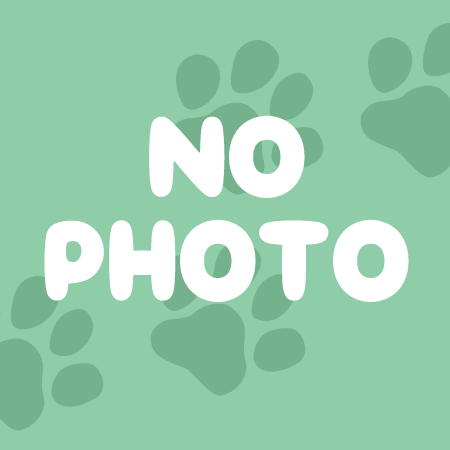
<style>
.page{position:relative;width:450px;height:450px;background:#8fcca8}
.page>*{position:absolute;margin:0}
.t1{font:104px/104px "funwariround";color:#ffffff}
</style>
<div class="page">
<p class="t1" style="left:44px;top:115px;width:365px;height:187px;text-align:center">NO<br>PHOTO</p>
</div>
